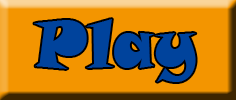
<style>
.page{position:relative;width:236px;height:100px;background:#f39500}
.page>*{position:absolute;margin:0}
.t1{font:65px "SnapITC-Regular";color:#00439c}
</style>
<div class="page">
<p class="t1" style="left:34px;top:19px;width:162px;height:63px">Play</p>
</div>
